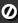
<style>
.page{position:relative;width:18px;height:23px;background:#333333}
.page>*{position:absolute;margin:0}
.t1{font:24px "EarthOrbiterExtra-Bold";color:#ffffff}
</style>
<div class="page">
<p class="t1" style="left:1px;top:4px;width:16px;height:15px">0</p>
</div>
